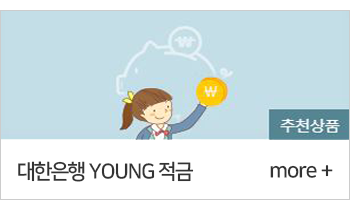
<style>
.page{position:relative;width:360px;height:200px;background:#c3dee7}
.page>*{position:absolute;margin:0}
.t1{font:20.8px "NanumSquare_acB";letter-spacing:-0.05em}
.t2{font:20.8px "NanumSquare_acB";letter-spacing:-0.05em;color:#333333}
</style>
<div class="page">
<p class="t1" style="left:17px;top:161px;width:141px;height:21px">대한은행 마이통장</p>
<p class="t2" style="left:18px;top:161px;width:176px;height:21px">대한은행 YOUNG 적금</p>
<p class="t2" style="left:270px;top:165px;width:63px;height:13px">more +</p>
</div>
